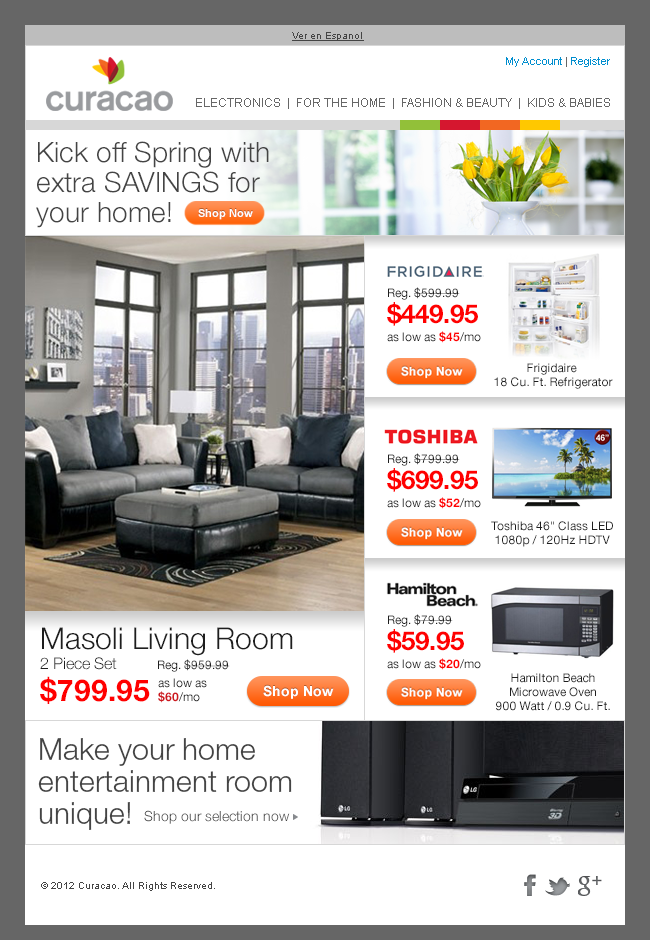
<style>
.page{position:relative;width:650px;height:940px;background:#ffffff}
.page>*{position:absolute;margin:0}
.t1{font:10px "ArialMT";color:#444444;text-decoration:underline}
.t2{font:11px "ArialMT";color:#008ecf}
.t3{font:11px "ArialMT";color:#666666}
.t4{font:12px "ArialMT";color:#666666}
.t5{font:28px/30px "HelveticaNeue-Light";color:#444444}
.t6{font:11px "Arial-BoldMT";color:#ffffff}
.t7{font:12px/18px "HelveticaNeue-Roman";color:#1e1e1e}
.t8{font:26px/26px "HelveticaNeue-Bold";color:#ff0000}
.t9{font:12px/18px "HelveticaNeue-Bold";color:#ff0000}
.t10{font:12px/14px "HelveticaNeue-Roman";color:#1e1e1e}
.t11{font:30px/18px "HelveticaNeue-Light";color:#1e1e1e}
.t12{font:16px/20px "HelveticaNeue-Light";color:#1e1e1e}
.t13{font:30px/32px "HelveticaNeue-Bold";color:#ff0000}
.t14{font:12px "HelveticaNeue-Roman";color:#1e1e1e}
.t15{font:12px/14px "HelveticaNeue-Bold";color:#ce181e}
.t16{font:30px/32px "HelveticaNeue-Light";color:#444444}
.t17{font:14px "HelveticaNeue-Light";color:#444444}
.t18{font:10px "ArialMT";color:#444444}
</style>
<div class="page">
<p class="t1" style="left:292px;top:32px;width:72px;height:9px">Ver en Espanol</p>
<p class="t2" style="left:506px;top:57px;width:104px;height:10px">My Account<span class="t3"> | </span>Register</p>
<p class="t4" style="left:196px;top:98px;width:414px;height:11px">ELECTRONICS  |  FOR THE HOME  |  FASHION &amp; BEAUTY  |  KIDS &amp; BABIES</p>
<p class="t5" style="left:36px;top:141px;width:233px;height:87px">Kick off Spring with <br>extra SAVINGS for <br>your home!</p>
<p class="t6" style="left:198px;top:209px;width:55px;height:11px">Shop Now</p>
<p class="t7" style="left:387px;top:287px;width:94px;height:56px">Reg. $599.99<br><span class="t8">$449.95<br></span>as low as <span class="t9">$45</span>/mo</p>
<p class="t10" style="left:494px;top:363px;width:119px;height:26px;text-align:center">Frigidaire <br>18 Cu. Ft. Refrigerator</p>
<p class="t7" style="left:387px;top:453px;width:94px;height:56px">Reg. $799.99<br><span class="t8">$699.95<br></span>as low as <span class="t9">$52</span>/mo</p>
<p class="t10" style="left:491px;top:521px;width:122px;height:26px;text-align:center">Toshiba 46" Class LED<br>1080p / 120Hz HDTV</p>
<p class="t7" style="left:387px;top:614px;width:94px;height:56px">Reg. $79.99<br><span class="t8">$59.95<br></span>as low as <span class="t9">$20</span>/mo</p>
<p class="t11" style="left:40px;top:627px;width:253px;height:77px">Masoli Living Room<br><span class="t12">2 Piece Set<br></span><span class="t13">$799.95</span></p>
<p class="t14" style="left:158px;top:659px;width:72px;height:13px">Reg. $959.99</p>
<p class="t10" style="left:158px;top:678px;width:49px;height:25px">as low as<br><span class="t15">$60</span>/mo</p>
<p class="t10" style="left:496px;top:673px;width:114px;height:38px;text-align:center">Hamilton Beach<br>Microwave Oven<br>900 Watt / 0.9 Cu. Ft.</p>
<p class="t16" style="left:38px;top:738px;width:254px;height:92px">Make your home<br>entertainment room <br>unique!</p>
<p class="t17" style="left:144px;top:810px;width:146px;height:14px">Shop our selection now</p>
<p class="t18" style="left:41px;top:882px;width:174px;height:9px">© 2012 Curacao. All Rights Reserved.</p>
</div>
